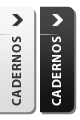
<style>
.page{position:relative;width:80px;height:120px}
.page>*{position:absolute;margin:0}
.t1{font:13px "MyriadPro-Bold";letter-spacing:0.05em;color:#333333}
.t2{font:13px "MyriadPro-Bold";letter-spacing:0.05em;color:#ffffff}
</style>
<div class="page">
<p class="t1" style="left:12px;top:36px;width:9px;height:70px;rotate:-90deg">CADERNOS</p>
<p class="t2" style="left:52px;top:36px;width:9px;height:70px;rotate:-90deg">CADERNOS</p>
</div>
